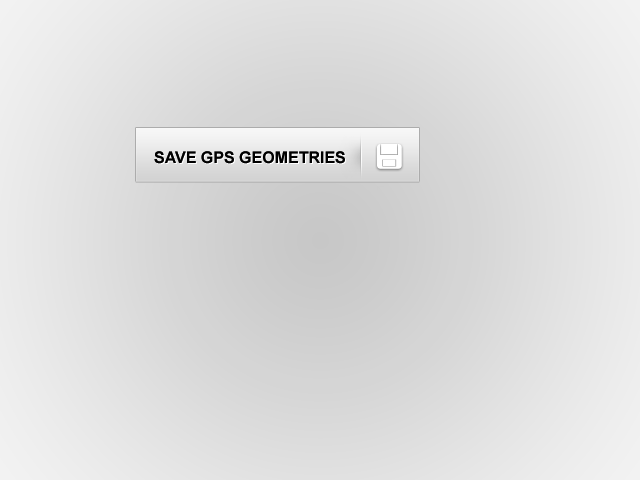
<style>
.page{position:relative;width:640px;height:480px}
.page>*{position:absolute;margin:0}
.t1{font:16px "Arial-BoldMT";color:#000000}
</style>
<div class="page">
<p class="t1" style="left:154px;top:151px;width:191px;height:13px">SAVE GPS GEOMETRIES</p>
<p class="t1" style="left:154px;top:151px;width:191px;height:13px">SAVE GPS GEOMETRIES</p>
</div>
